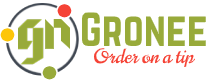
<style>
.page{position:relative;width:209px;height:80px;background:#ffffff}
.page>*{position:absolute;margin:0}
.t1{font:42px "Norwester-Regular";color:#98aa3a}
.t2{font:20px "Norican-Regular";color:#f54336}
</style>
<div class="page">
<p class="t1" style="left:82px;top:12px;width:124px;height:34px">Gronee</p>
<p class="t2" style="left:93px;top:48px;width:103px;height:19px">Order on a tip</p>
</div>
